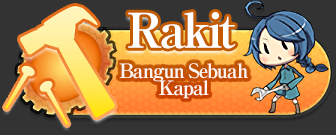
<style>
.page{position:relative;width:336px;height:135px;background:#333333}
.page>*{position:absolute;margin:0}
.t1{font:48px "RyuminPro-ExBold";letter-spacing:-0.08em;color:#ffffff}
.t2{font:20px/17px "RyuminPro-ExBold";letter-spacing:-0.08em;color:#fff6f1}
</style>
<div class="page">
<p class="t1" style="left:128px;top:12px;width:108px;height:37px">Rakit</p>
<p class="t2" style="left:119px;top:63px;width:129px;height:36px;text-align:center">Bangun Sebuah<br>Kapal</p>
</div>
